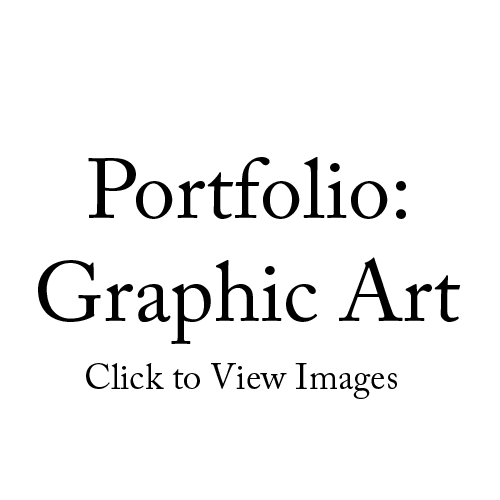
<style>
.page{position:relative;width:500px;height:500px;background:#ffffff}
.page>*{position:absolute;margin:0}
.t1{font:85.4px "ACaslonPro-Regular";color:#000000}
.t2{font:36px "ACaslonPro-Regular";color:#000000}
</style>
<div class="page">
<p class="t1" style="left:38px;top:157px;width:423px;height:187px;text-align:center">Portfolio:<br>Graphic Art</p>
<p class="t2" style="left:86px;top:363px;width:311px;height:36px">Click to View Images</p>
</div>
